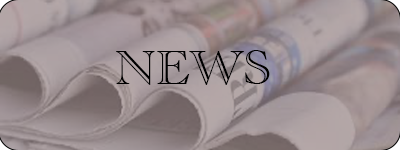
<style>
.page{position:relative;width:400px;height:150px}
.page>*{position:absolute;margin:0}
.t1{font:50px "AcademyEngravedLetPlain";color:#000000}
</style>
<div class="page">
<p class="t1" style="left:116px;top:50px;width:154px;height:35px">NEWS</p>
</div>
